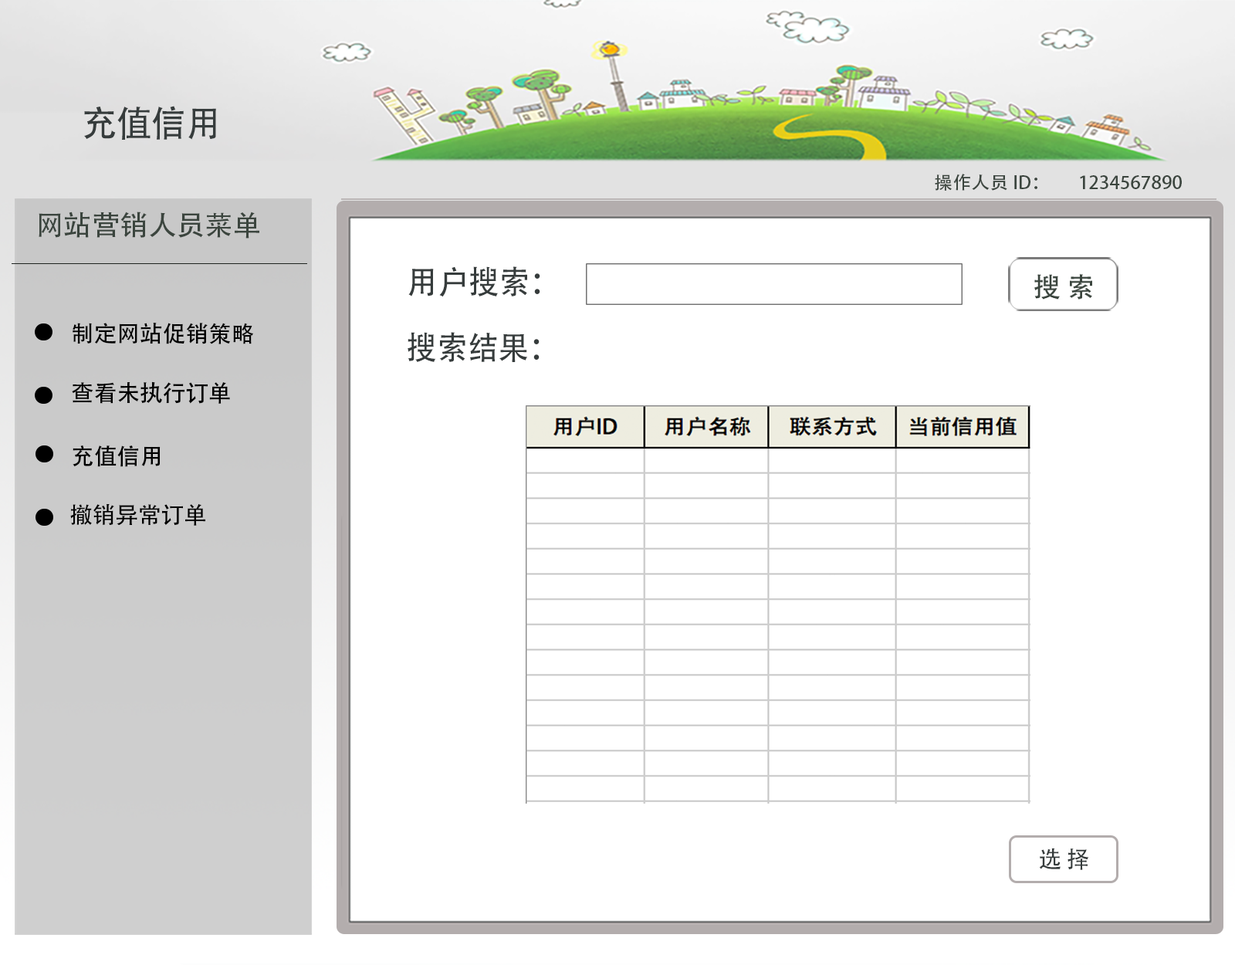
<style>
.page{position:relative;width:1235px;height:965px;background:#ffffff}
.page>*{position:absolute;margin:0}
.t1{font:36.3px "AdobeHeitiStd-Regular";letter-spacing:-0.005em;color:#363c3c;text-transform:uppercase;scale:0.96 1}
.t2{font:17.8px "AdobeHeitiStd-Regular";color:#3b453e;scale:1.04 1}
.t3{font:28.1px "AdobeHeitiStd-Regular";color:#3b453e}
.t4{font:32.2px "AdobeHeitiStd-Regular";letter-spacing:-0.005em;color:#363c3c;text-transform:uppercase;scale:0.96 1}
.t5{font:22.8px "AdobeHeitiStd-Regular";color:#010101}
.t6{font:22.8px "AdobeHeitiStd-Regular";color:#000000}
.t7{font:22.8px "AdobeHeitiStd-Regular";letter-spacing:-0.005em;color:#000000;text-transform:uppercase}
.t8{font:23.2px "AdobeHeitiStd-Regular";letter-spacing:-0.005em;color:#363c3c;text-transform:uppercase}
</style>
<div class="page">
<p class="t1" style="left:84px;top:106px;width:132px;height:34px">充值信用</p>
<p class="t2" style="left:935px;top:174px;width:247px;height:17px">操作人员ID：        1234567890</p>
<p class="t3" style="left:39px;top:212px;width:220px;height:27px">网站营销人员菜单</p>
<p class="t4" style="left:408px;top:266px;width:133px;height:31px">用户搜索：</p>
<p class="t5" style="left:73px;top:323px;width:180px;height:21px">制定网站促销策略</p>
<p class="t4" style="left:408px;top:332px;width:132px;height:30px">搜索结果：</p>
<p class="t6" style="left:72px;top:381px;width:158px;height:23px">查看未执行订单</p>
<p class="t6" style="left:73px;top:446px;width:88px;height:21px">充值信用</p>
<p class="t7" style="left:70px;top:504px;width:135px;height:22px">撤销异常订单</p>
<p class="t8" style="left:1039px;top:848px;width:51px;height:22px">选 择</p>
</div>
